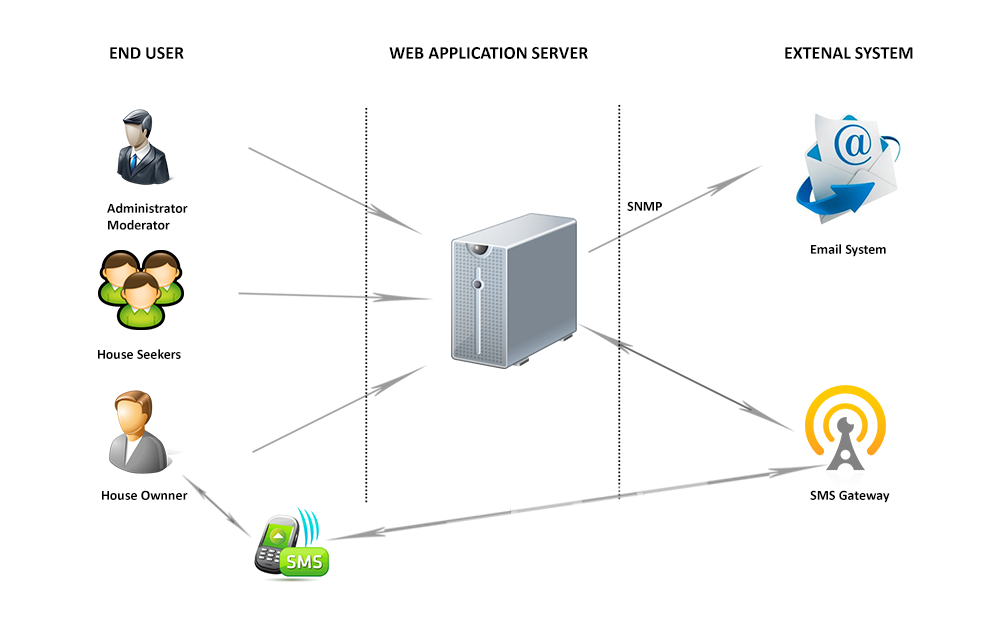
<style>
.page{position:relative;width:1000px;height:638px;background:#ffffff}
.page>*{position:absolute;margin:0}
.t1{font:18px "Calibri-Bold";color:#000000;text-transform:uppercase}
.t2{font:14.1px "Calibri-Bold";color:#000000;text-transform:uppercase}
.t3{font:14px "Calibri-Bold";color:#000000}
</style>
<div class="page">
<p class="t1" style="left:110px;top:47px;width:74px;height:12px">End User</p>
<p class="t1" style="left:389px;top:47px;width:199px;height:12px">Web Application server</p>
<p class="t1" style="left:785px;top:47px;width:128px;height:12px">Extenal system</p>
<p class="t2" style="left:365px;top:107px;width:3px;height:396px;rotate:90deg">..........................................................................................................</p>
<p class="t2" style="left:618px;top:104px;width:3px;height:396px;rotate:90deg">..........................................................................................................</p>
<p class="t3" style="left:107px;top:203px;width:81px;height:27px">Administrator<br>Moderator</p>
<p class="t3" style="left:627px;top:201px;width:35px;height:10px">SNMP</p>
<p class="t3" style="left:811px;top:244px;width:75px;height:13px">Email System</p>
<p class="t3" style="left:98px;top:349px;width:83px;height:10px">House Seekers</p>
<p class="t3" style="left:102px;top:490px;width:86px;height:10px">House Ownner</p>
<p class="t3" style="left:810px;top:490px;width:80px;height:13px">SMS Gateway</p>
</div>
